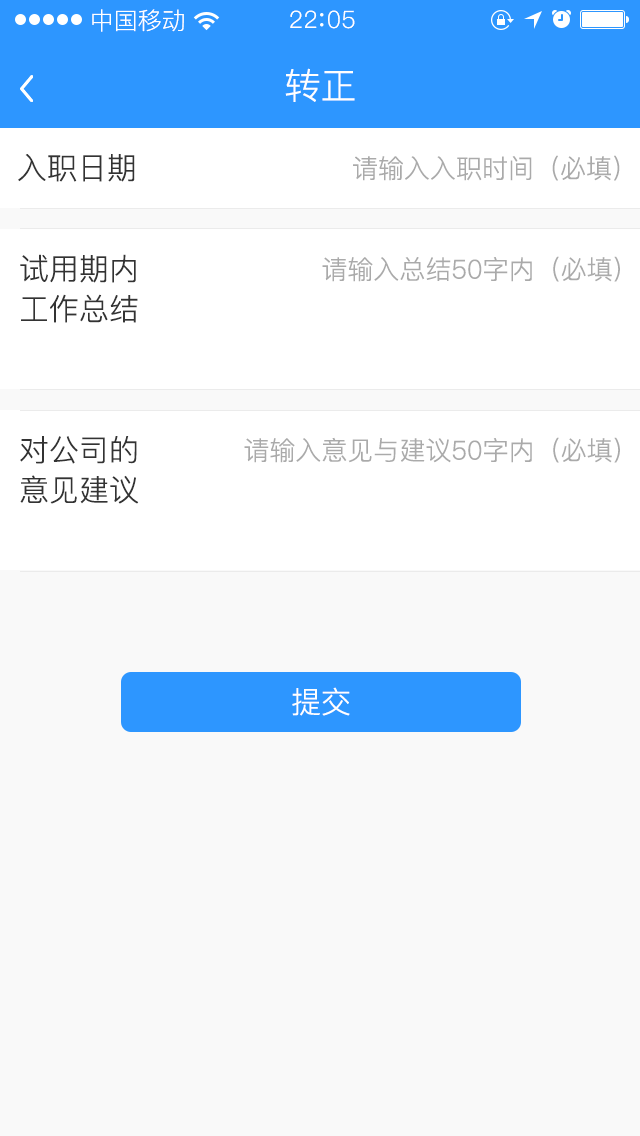
<style>
.page{position:relative;width:640px;height:1136px;background:#f9f9f9}
.page>*{position:absolute;margin:0}
.t1{font:24px "PingFang-SC-Regular";color:#ffffff}
.t2{font:24px "PingFang-SC-Regular";letter-spacing:0.03em;color:#ffffff}
.t3{font:36px "PingFang-SC-Regular";color:#ffffff}
.t4{font:30px "PingFang-SC-Regular";color:#333333}
.t5{font:26px "PingFang-SC-Regular";color:#aaaaaa}
.t6{font:30px/40px "PingFang-SC-Regular";color:#333333}
.t7{font:30px "PingFang-SC-Regular";color:#ffffff}
</style>
<div class="page">
<p class="t1" style="left:92px;top:9px;width:92px;height:23px">中国移动</p>
<p class="t2" style="left:290px;top:10px;width:65px;height:19px">22 05</p>
<p class="t3" style="left:285px;top:68px;width:70px;height:34px">转正</p>
<p class="t4" style="left:18px;top:154px;width:117px;height:28px">入职日期</p>
<p class="t5" style="left:353px;top:155px;width:267px;height:26px">请输入入职时间（必填）</p>
<p class="t6" style="left:20px;top:254px;width:118px;height:69px;text-align:center">试用期内<br>工作总结</p>
<p class="t5" style="left:322px;top:256px;width:298px;height:26px">请输入总结50字内（必填）</p>
<p class="t6" style="left:20px;top:436px;width:119px;height:68px;text-align:center">对公司的<br>意见建议</p>
<p class="t5" style="left:244px;top:437px;width:376px;height:26px">请输入意见与建议50字内（必填）</p>
<p class="t7" style="left:292px;top:687px;width:58px;height:29px">提交</p>
</div>
